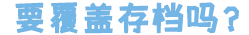
<style>
.page{position:relative;width:249px;height:35px;background:#ffffff}
.page>*{position:absolute;margin:0}
.t1{font:33.7px "shetumodengxiaofangti";color:#73b5e4;font-weight:bold}
</style>
<div class="page">
<p class="t1" style="left:15px;top:2px;width:224px;height:32px">要覆盖存档吗？</p>
</div>
